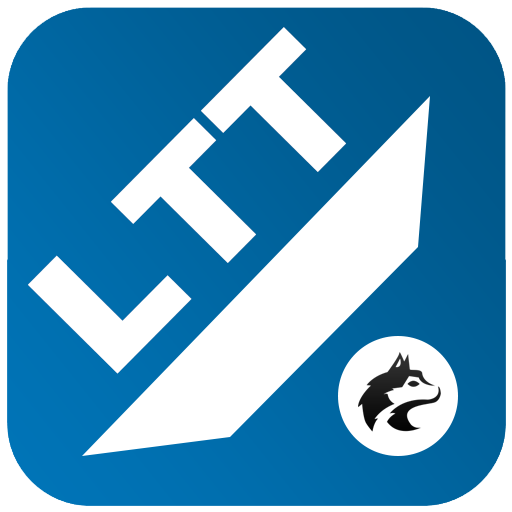
<style>
.page{position:relative;width:512px;height:512px;background:#ffffff}
.page>*{position:absolute;margin:0}
.t1{font:192.9px "BolsterBold";color:#ffffff}
</style>
<div class="page">
<p class="t1" style="left:27px;top:27px;width:320px;height:347px;rotate:-45deg">LTT</p>
</div>
